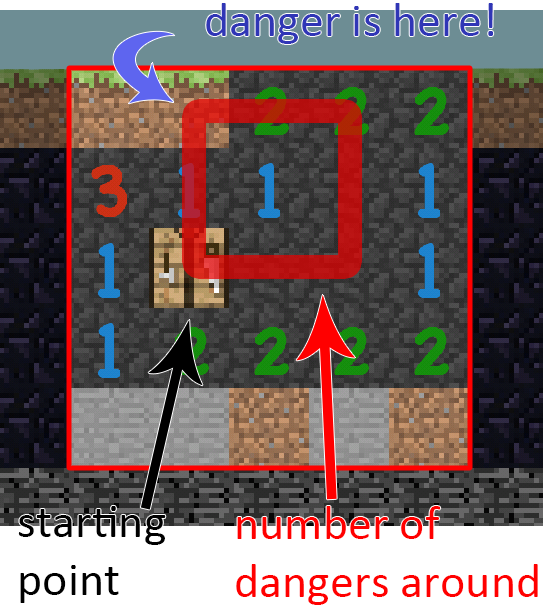
<style>
.page{position:relative;width:543px;height:610px}
.page>*{position:absolute;margin:0}
.t1{font:48px "Calibri";color:#3036b6}
.t2{font:48px "Calibri";color:#000000}
.t3{font:48px "Calibri";color:#ff0000}
</style>
<div class="page">
<p class="t1" style="left:206px;top:3px;width:288px;height:41px">danger is here!</p>
<p class="t2" style="left:18px;top:506px;width:148px;height:97px">starting <br>point</p>
<p class="t3" style="left:236px;top:506px;width:302px;height:99px">number of <br>dangers around</p>
</div>
